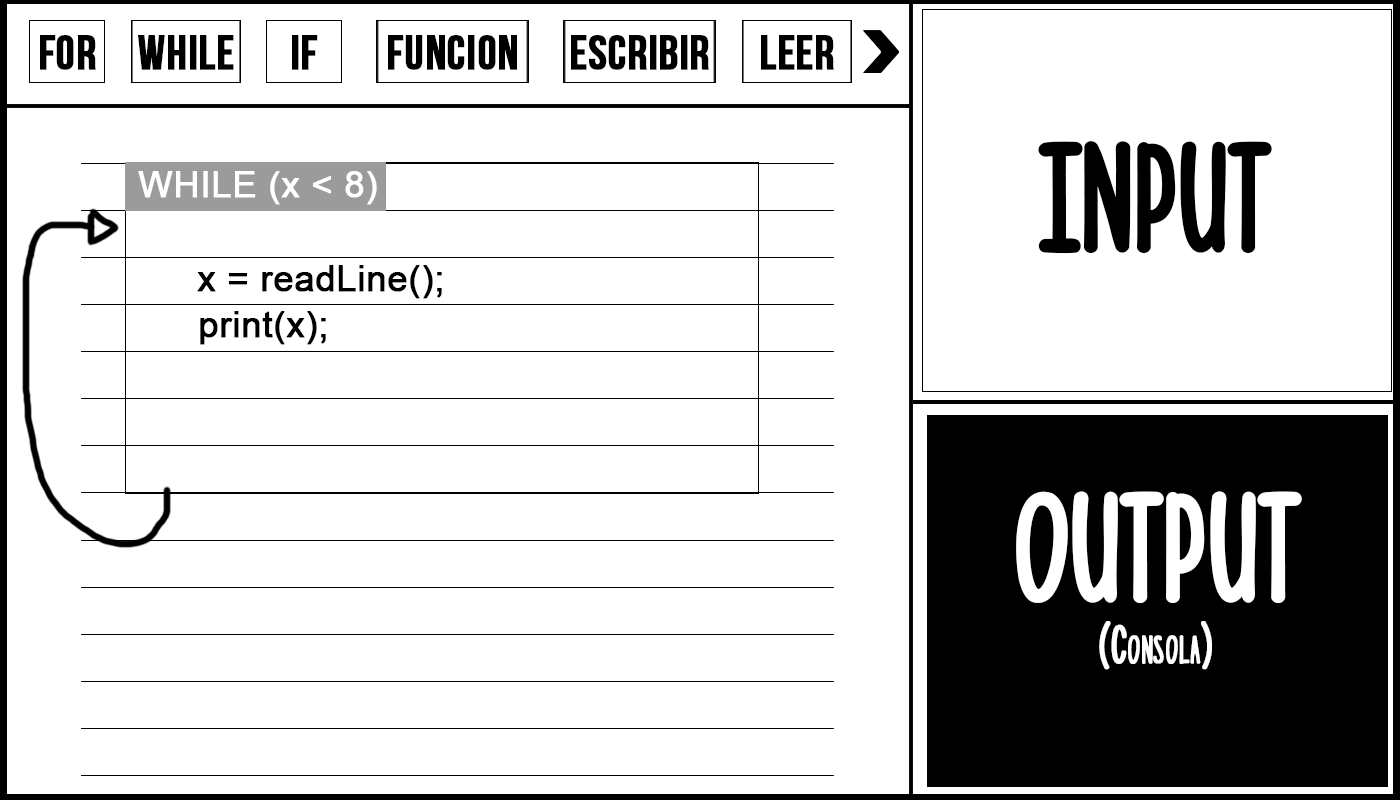
<style>
.page{position:relative;width:1400px;height:800px;background:#ffffff}
.page>*{position:absolute;margin:0}
.t1{font:48px "BebasNeue";color:#000000;font-weight:bold}
.t2{font:135px "Photographs";color:#000000;font-weight:bold}
.t3{font:36px "ArialMT";color:#ffffff;font-weight:bold}
.t4{font:36px "ArialMT";color:#000000;font-weight:bold}
.t5{font:135px "Photographs";color:#ffffff;font-weight:bold}
.t6{font:48px "Photographs";color:#ffffff;font-weight:bold}
</style>
<div class="page">
<p class="t1" style="left:40px;top:35px;width:56px;height:35px">FOR</p>
<p class="t1" style="left:138px;top:35px;width:96px;height:35px">WHILE</p>
<p class="t1" style="left:292px;top:35px;width:26px;height:35px">IF</p>
<p class="t1" style="left:388px;top:35px;width:129px;height:35px">FUNCION</p>
<p class="t1" style="left:571px;top:35px;width:138px;height:35px">ESCRIBIR</p>
<p class="t1" style="left:761px;top:35px;width:73px;height:35px">LEER</p>
<p class="t2" style="left:1038px;top:141px;width:234px;height:113px">INPUT</p>
<p class="t3" style="left:138px;top:171px;width:239px;height:34px">WHILE (x &lt; 8)</p>
<p class="t4" style="left:197px;top:265px;width:245px;height:34px">x = readLine();</p>
<p class="t4" style="left:200px;top:311px;width:126px;height:34px">print(x);</p>
<p class="t5" style="left:1016px;top:491px;width:286px;height:113px">OUTPUT</p>
<p class="t6" style="left:1099px;top:621px;width:113px;height:49px">(Consola)</p>
</div>
